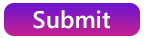
<style>
.page{position:relative;width:144px;height:39px;background:#ffffff}
.page>*{position:absolute;margin:0}
.t1{font:23.9px "YuGothicUI-Semibold";color:#ffffff}
</style>
<div class="page">
<p class="t1" style="left:33px;top:10px;width:77px;height:19px">Submit</p>
</div>
